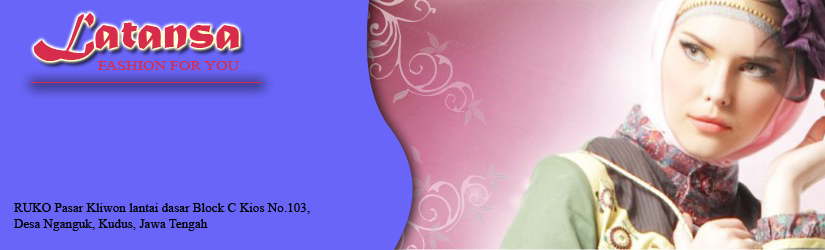
<style>
.page{position:relative;width:825px;height:250px;background:#6965f8}
.page>*{position:absolute;margin:0}
.t1{font:52.7px "MaturaMTScriptCapitals";color:#d82c4c}
.t2{font:13.2px "TimesNewRomanPSMT";color:#d82c4c;scale:1.21 1}
.t3{font:13.2px "TimesNewRomanPSMT";color:#010101}
</style>
<div class="page">
<p class="t1" style="left:33px;top:13px;width:206px;height:48px">Latansa</p>
<p class="t2" style="left:98px;top:61px;width:141px;height:9px">FASHION FOR YOU</p>
<p class="t3" style="left:14px;top:203px;width:296px;height:28px">RUKO Pasar Kliwon lantai dasar Block C Kios No.103,<br>Desa Nganguk, Kudus, Jawa Tengah</p>
</div>
